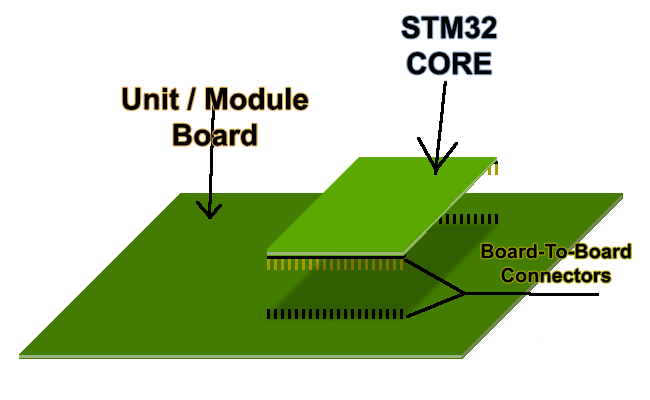
<style>
.page{position:relative;width:650px;height:400px;background:#ffffff}
.page>*{position:absolute;margin:0}
.t1{font:30px "Arial-BoldMT";color:#000000}
.t2{font:20px "Arial-BoldMT";color:#000000}
</style>
<div class="page">
<p class="t1" style="left:401px;top:16px;width:96px;height:59px;text-align:center">STM32<br>CORE</p>
<p class="t1" style="left:122px;top:87px;width:186px;height:59px;text-align:center">Unit / Module<br>Board</p>
<p class="t2" style="left:481px;top:243px;width:150px;height:40px;text-align:center">Board-To-Board<br>Connectors</p>
</div>
